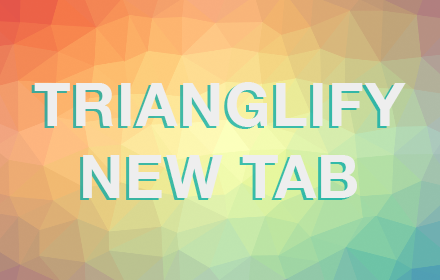
<style>
.page{position:relative;width:440px;height:280px}
.page>*{position:absolute;margin:0}
.t1{font:60px "HelveticaNeue-Bold";letter-spacing:0.025em;color:#eeeeee;text-transform:uppercase}
</style>
<div class="page">
<p class="t1" style="left:34px;top:82px;width:372px;height:116px;text-align:center">Trianglify<br>New Tab</p>
</div>
